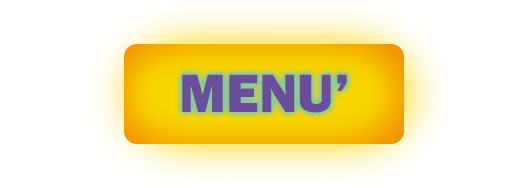
<style>
.page{position:relative;width:528px;height:188px;background:#ffffff}
.page>*{position:absolute;margin:0}
.t1{font:56px "FranklinGothic-Heavy";color:#694e9a}
</style>
<div class="page">
<p class="t1" style="left:182px;top:74px;width:165px;height:39px">MENU’</p>
</div>
